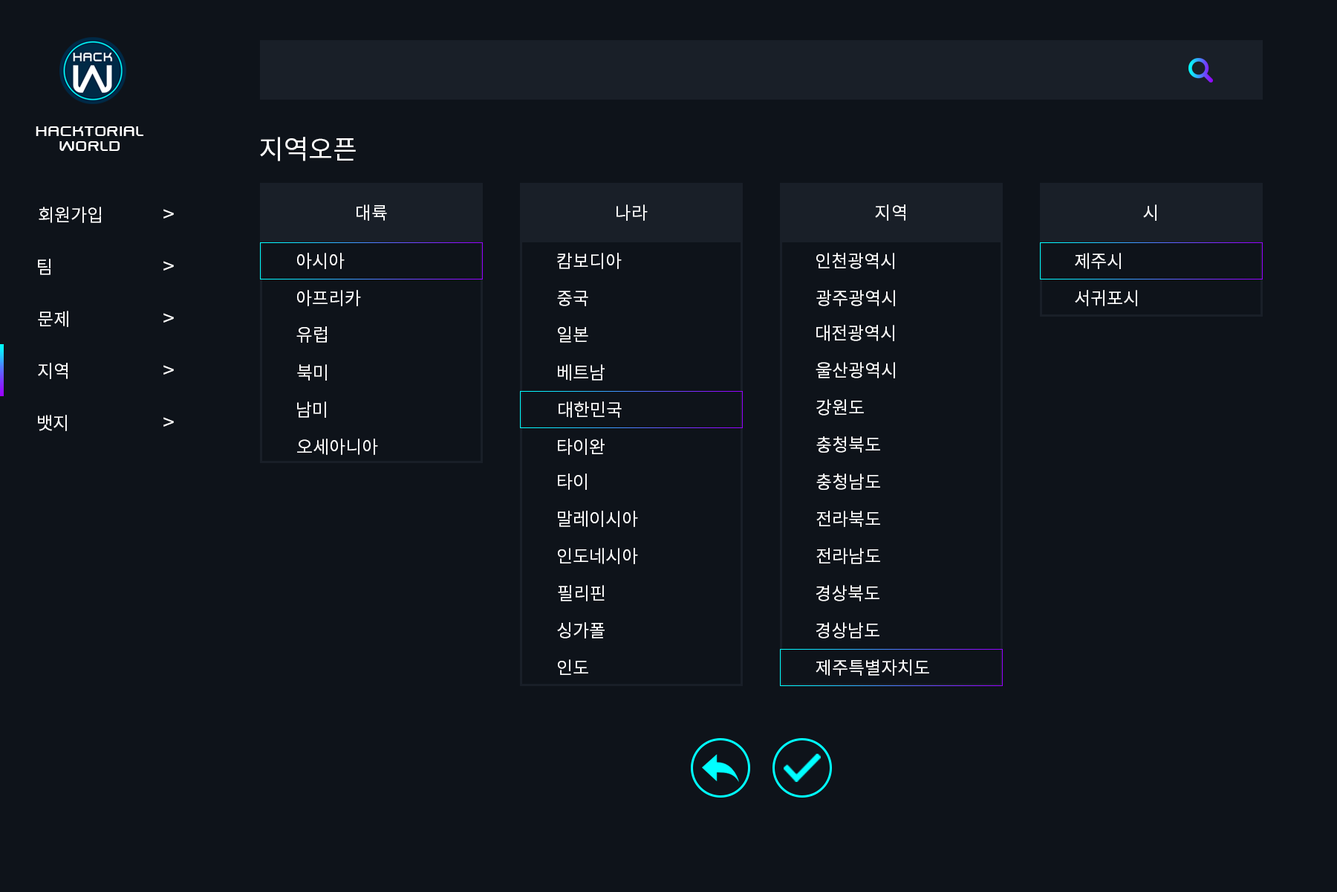
<style>
.page{position:relative;width:1337px;height:892px;background:#0e131a}
.page>*{position:absolute;margin:0}
.t1{font:17.8px/14.9px "SwiszRegular";color:#ffffff}
.t2{font:26.7px "NotoSansCJKkr-Regular";color:#ffffff}
.t3{font:17.8px "NotoSansCJKkr-Regular";color:#ffffff}
.t4{font:20.8px "NotoSansCJKkr-Regular";color:#ffffff}
</style>
<div class="page">
<p class="t1" style="left:36px;top:126px;width:107px;height:25px;text-align:center">hacktorial<br>world</p>
<p class="t2" style="left:260px;top:137px;width:96px;height:24px">지역오픈</p>
<p class="t3" style="left:39px;top:207px;width:62px;height:16px">회원가입</p>
<p class="t4" style="left:163px;top:209px;width:11px;height:9px">&gt;</p>
<p class="t3" style="left:357px;top:204px;width:30px;height:17px">대륙</p>
<p class="t3" style="left:617px;top:204px;width:31px;height:17px">나라</p>
<p class="t3" style="left:875px;top:204px;width:31px;height:17px">지역</p>
<p class="t3" style="left:1143px;top:204px;width:14px;height:17px">시</p>
<p class="t3" style="left:297px;top:253px;width:48px;height:16px">아시아</p>
<p class="t3" style="left:557px;top:253px;width:65px;height:16px">캄보디아</p>
<p class="t3" style="left:817px;top:253px;width:78px;height:16px">인천광역시</p>
<p class="t3" style="left:1075px;top:253px;width:46px;height:16px">제주시</p>
<p class="t3" style="left:38px;top:259px;width:13px;height:16px">팀</p>
<p class="t4" style="left:163px;top:261px;width:11px;height:9px">&gt;</p>
<p class="t3" style="left:297px;top:290px;width:64px;height:16px">아프리카</p>
<p class="t3" style="left:557px;top:291px;width:31px;height:15px">중국</p>
<p class="t3" style="left:817px;top:290px;width:78px;height:16px">광주광역시</p>
<p class="t3" style="left:1075px;top:290px;width:63px;height:16px">서귀포시</p>
<p class="t3" style="left:38px;top:311px;width:30px;height:16px">문제</p>
<p class="t4" style="left:163px;top:313px;width:11px;height:9px">&gt;</p>
<p class="t3" style="left:296px;top:326px;width:31px;height:17px">유럽</p>
<p class="t3" style="left:558px;top:326px;width:30px;height:17px">일본</p>
<p class="t3" style="left:817px;top:325px;width:78px;height:16px">대전광역시</p>
<p class="t3" style="left:38px;top:363px;width:30px;height:16px">지역</p>
<p class="t4" style="left:163px;top:365px;width:11px;height:9px">&gt;</p>
<p class="t3" style="left:297px;top:364px;width:30px;height:16px">북미</p>
<p class="t3" style="left:558px;top:364px;width:47px;height:16px">베트남</p>
<p class="t3" style="left:816px;top:362px;width:79px;height:16px">울산광역시</p>
<p class="t3" style="left:297px;top:401px;width:29px;height:17px">남미</p>
<p class="t3" style="left:559px;top:401px;width:63px;height:17px">대한민국</p>
<p class="t3" style="left:817px;top:399px;width:47px;height:16px">강원도</p>
<p class="t3" style="left:38px;top:415px;width:29px;height:16px">뱃지</p>
<p class="t4" style="left:163px;top:417px;width:11px;height:9px">&gt;</p>
<p class="t3" style="left:817px;top:436px;width:63px;height:16px">충청북도</p>
<p class="t3" style="left:297px;top:438px;width:81px;height:17px">오세아니아</p>
<p class="t3" style="left:558px;top:438px;width:47px;height:17px">타이완</p>
<p class="t3" style="left:558px;top:473px;width:29px;height:17px">타이</p>
<p class="t3" style="left:817px;top:473px;width:63px;height:17px">충청남도</p>
<p class="t3" style="left:558px;top:510px;width:80px;height:17px">말레이시아</p>
<p class="t3" style="left:817px;top:510px;width:63px;height:17px">전라북도</p>
<p class="t3" style="left:558px;top:548px;width:80px;height:16px">인도네시아</p>
<p class="t3" style="left:817px;top:548px;width:63px;height:16px">전라남도</p>
<p class="t3" style="left:558px;top:585px;width:47px;height:16px">필리핀</p>
<p class="t3" style="left:816px;top:585px;width:64px;height:16px">경상북도</p>
<p class="t3" style="left:557px;top:622px;width:48px;height:16px">싱가폴</p>
<p class="t3" style="left:816px;top:622px;width:64px;height:16px">경상남도</p>
<p class="t3" style="left:558px;top:659px;width:30px;height:16px">인도</p>
<p class="t3" style="left:816px;top:659px;width:113px;height:16px">제주특별자치도</p>
</div>
